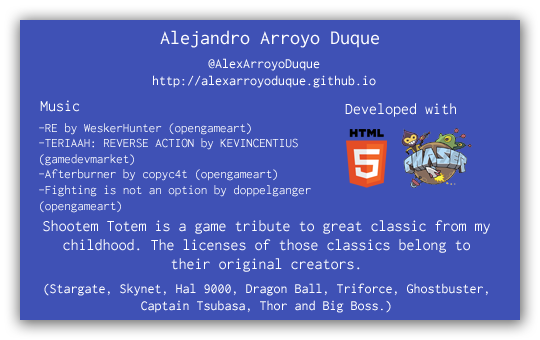
<style>
.page{position:relative;width:540px;height:340px;background:#3f51b5}
.page>*{position:absolute;margin:0}
.t1{font:20px "Inconsolata-Regular";color:#ffffff}
.t2{font:14px "Inconsolata-Regular";color:#ffffff}
.t3{font:16px "Inconsolata-Regular";color:#ffffff}
.t4{font:13px "Inconsolata-Regular";color:#ffffff}
</style>
<div class="page">
<p class="t1" style="left:160px;top:30px;width:219px;height:18px">Alejandro Arroyo Duque</p>
<p class="t2" style="left:153px;top:58px;width:223px;height:30px;text-align:center">@AlexArroyoDuque<br>http://alexarroyoduque.github.io</p>
<p class="t3" style="left:40px;top:100px;width:40px;height:12px">Music</p>
<p class="t3" style="left:345px;top:103px;width:111px;height:14px">Developed with</p>
<p class="t4" style="left:39px;top:123px;width:272px;height:90px">-RE by WeskerHunter (opengameart)<br>-TERIAAH: REVERSE ACTION by KEVINCENTIUS (gamedevmarket)<br>-Afterburner by copyc4t (opengameart)<br>-Fighting is not an option by doppelganger (opengameart)</p>
<p class="t3" style="left:43px;top:220px;width:447px;height:52px;text-align:center">Shootem Totem is a game tribute to great classic from my childhood. The licenses of those classics belong to their original creators.</p>
<p class="t2" style="left:44px;top:283px;width:444px;height:30px;text-align:center">(Stargate, Skynet, Hal 9000, Dragon Ball, Triforce, Ghostbuster, Captain Tsubasa, Thor and Big Boss.)</p>
</div>
